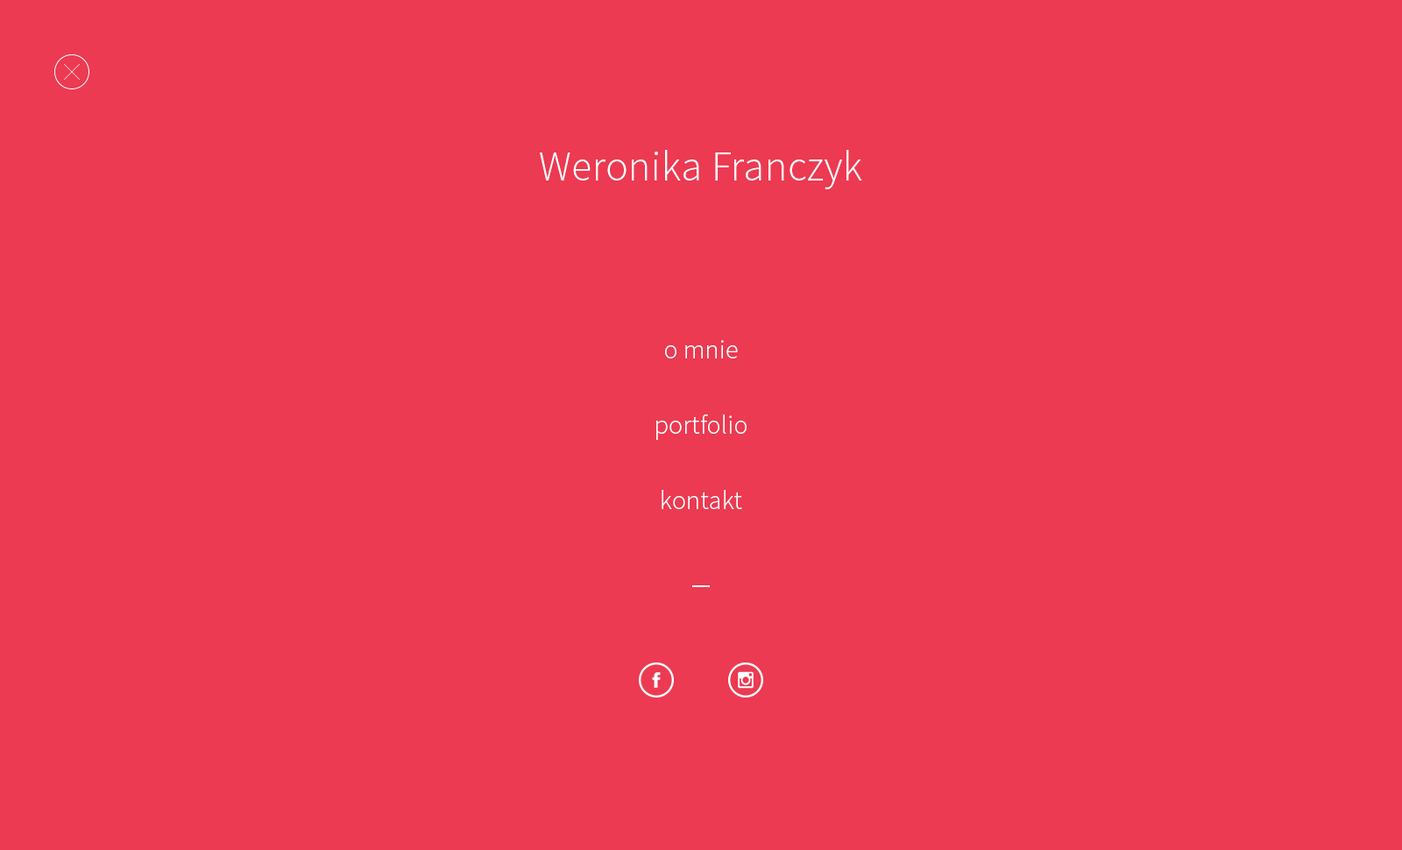
<style>
.page{position:relative;width:1402px;height:850px;background:#eb3a52}
.page>*{position:absolute;margin:0}
.t1{font:42.1px "SourceSansPro-Light";letter-spacing:0.01em;color:#ffffff}
.t2{font:26.3px/75.4px "SourceSansPro-Light";letter-spacing:0.01em;color:#ffffff}
</style>
<div class="page">
<p class="t1" style="left:540px;top:150px;width:323px;height:39px">Weronika Franczyk</p>
<p class="t2" style="left:657px;top:340px;width:90px;height:169px;text-align:center">o mnie<br>portfolio<br>kontakt</p>
</div>
